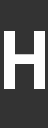
<style>
.page{position:relative;width:48px;height:128px;background:#333333}
.page>*{position:absolute;margin:0}
.t1{font:75px "AdobeGothicStd-Bold";color:#ffffff}
</style>
<div class="page">
<p class="t1" style="left:4px;top:31px;width:41px;height:58px">H</p>
</div>
